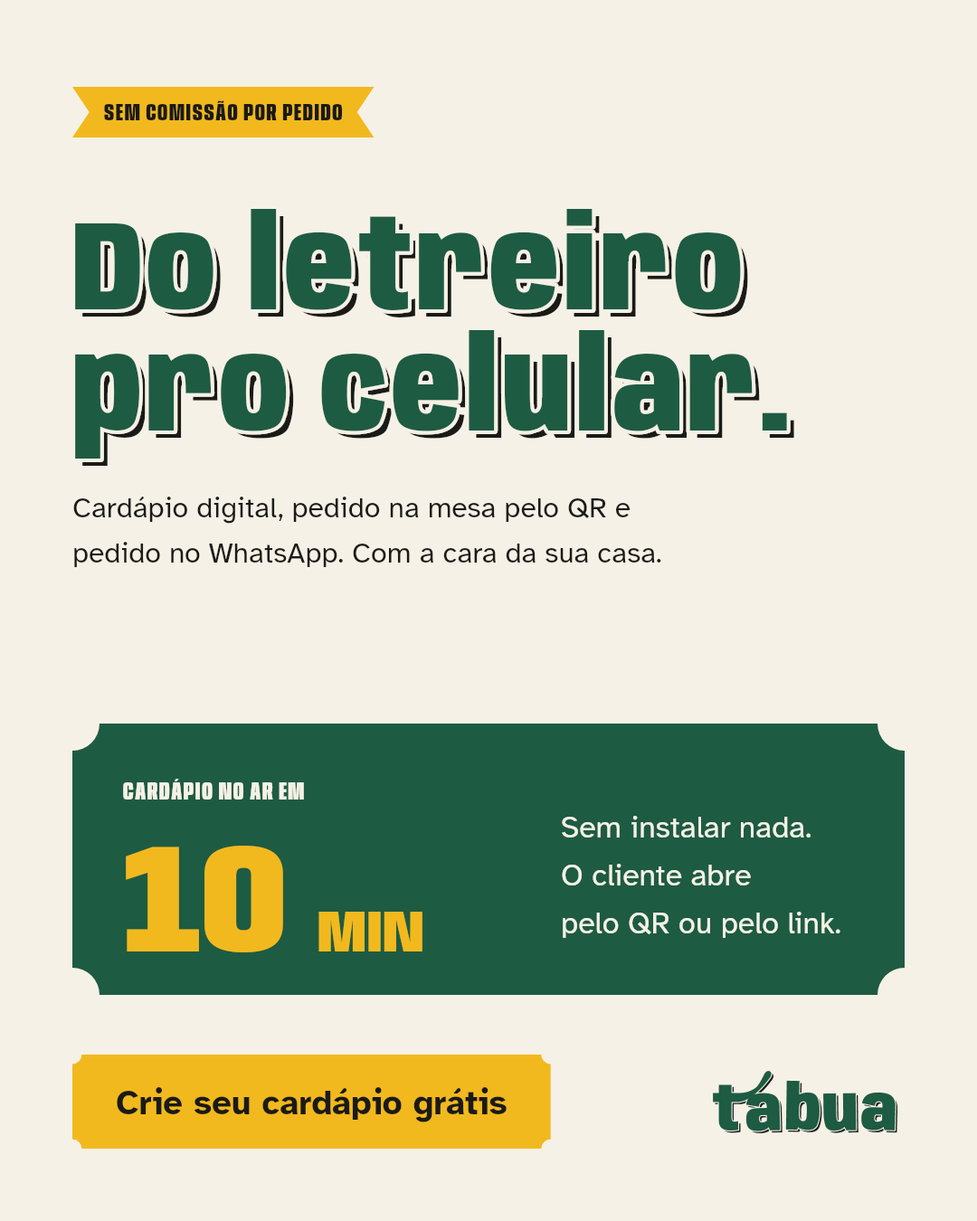
<style>
.page{position:relative;width:977px;height:1221px;background:#f6f1e6}
.page>*{position:absolute;margin:0}
.t1{font:24.4px "Anybody-ExtraBold-W60";letter-spacing:0.06em;color:#1a1a17}
.t2{font:126.6px/121.2px "Anybody-Black-W75";letter-spacing:0.034em;color:#1e5b43}
.t3{font:126.6px/121.2px "Anybody-Black-W75";letter-spacing:0.034em}
.t4{font:28.9px/45.2px "AtkinsonHyperlegible-Regular";color:#1a1a17}
.t5{font:25.3px "Anybody-ExtraBold-W60";letter-spacing:0.06em;color:#f6f1e6}
.t6{font:30.7px/47.9px "AtkinsonHyperlegible-Regular";color:#f6f1e6}
.t7{font:153.7px "Anybody-Black-W80";color:#f2b91e}
.t8{font:57.9px "Anybody-Black-W80";color:#f2b91e}
.t9{font:34.4px "AtkinsonHyperlegible-Bold";color:#1a1a17}
</style>
<div class="page">
<p class="t1" style="left:104px;top:100px;width:239px;height:20px">SEM COMISSÃO POR PEDIDO</p>
<p class="t2" style="left:71px;top:205px;width:719px;height:257px">Do letreiro<br>pro celular.</p>
<p class="t3" style="left:82px;top:216px;width:712px;height:250px">Do letreiro<br>pro celular.</p>
<p class="t4" style="left:73px;top:496px;width:588px;height:71px">Cardápio digital, pedido na mesa pelo QR e<br>pedido no WhatsApp. Com a cara da sua casa.</p>
<p class="t5" style="left:123px;top:779px;width:181px;height:20px">CARDÁPIO NO AR EM</p>
<p class="t6" style="left:562px;top:816px;width:278px;height:122px">Sem instalar nada.<br>O cliente abre<br>pelo QR ou pelo link.</p>
<p class="t7" style="left:126px;top:846px;width:157px;height:106px">10</p>
<p class="t8" style="left:318px;top:912px;width:104px;height:39px">MIN</p>
<p class="t9" style="left:117px;top:1087px;width:389px;height:35px">Crie seu cardápio grátis</p>
</div>
